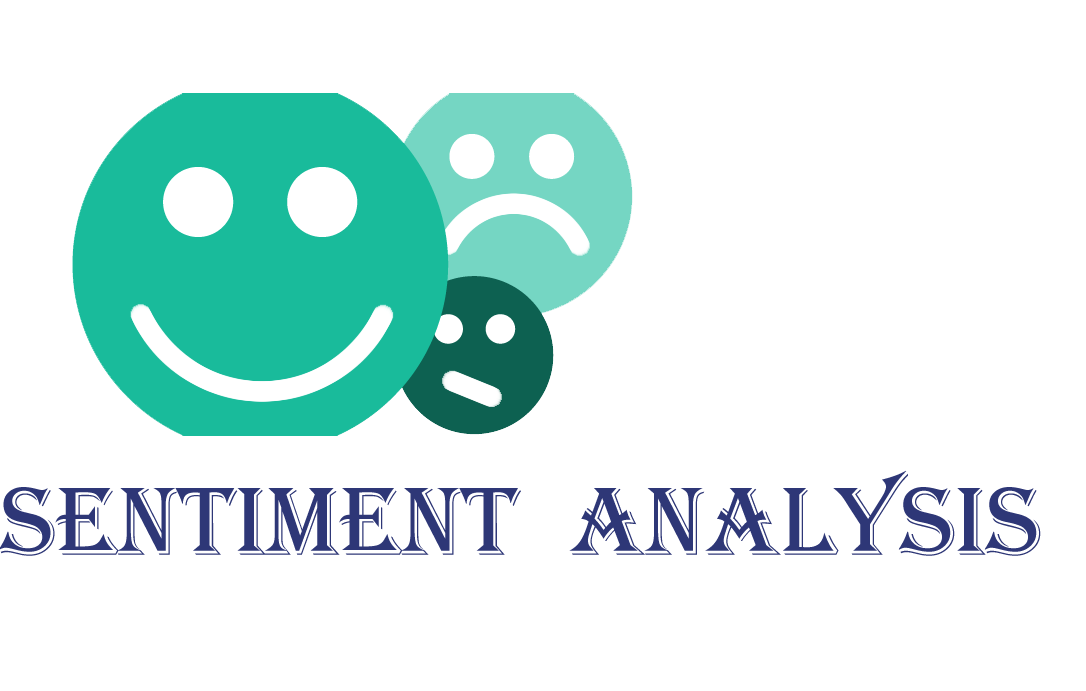
<style>
.page{position:relative;width:1086px;height:691px;background:#ffffff}
.page>*{position:absolute;margin:0}
.t1{font:100px "Algerian";color:#2e3777}
</style>
<div class="page">
<p class="t1" style="left:0px;top:470px;width:1041px;height:86px">SENTIMENT  ANALYSIS</p>
</div>
